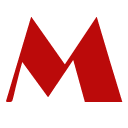
<style>
.page{position:relative;width:128px;height:128px;background:#ffffff}
.page>*{position:absolute;margin:0}
.t1{font:125px "Broadway";color:#bb0a0a}
</style>
<div class="page">
<p class="t1" style="left:6px;top:17px;width:117px;height:85px">M</p>
</div>
